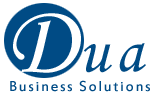
<style>
.page{position:relative;width:155px;height:95px;background:#ffffff}
.page>*{position:absolute;margin:0}
.t1{font:15.9px "EstrangeloEdessa";letter-spacing:0.1em;color:#004b85}
</style>
<div class="page">
<p class="t1" style="left:10px;top:80px;width:140px;height:12px">Business Solutions</p>
</div>
